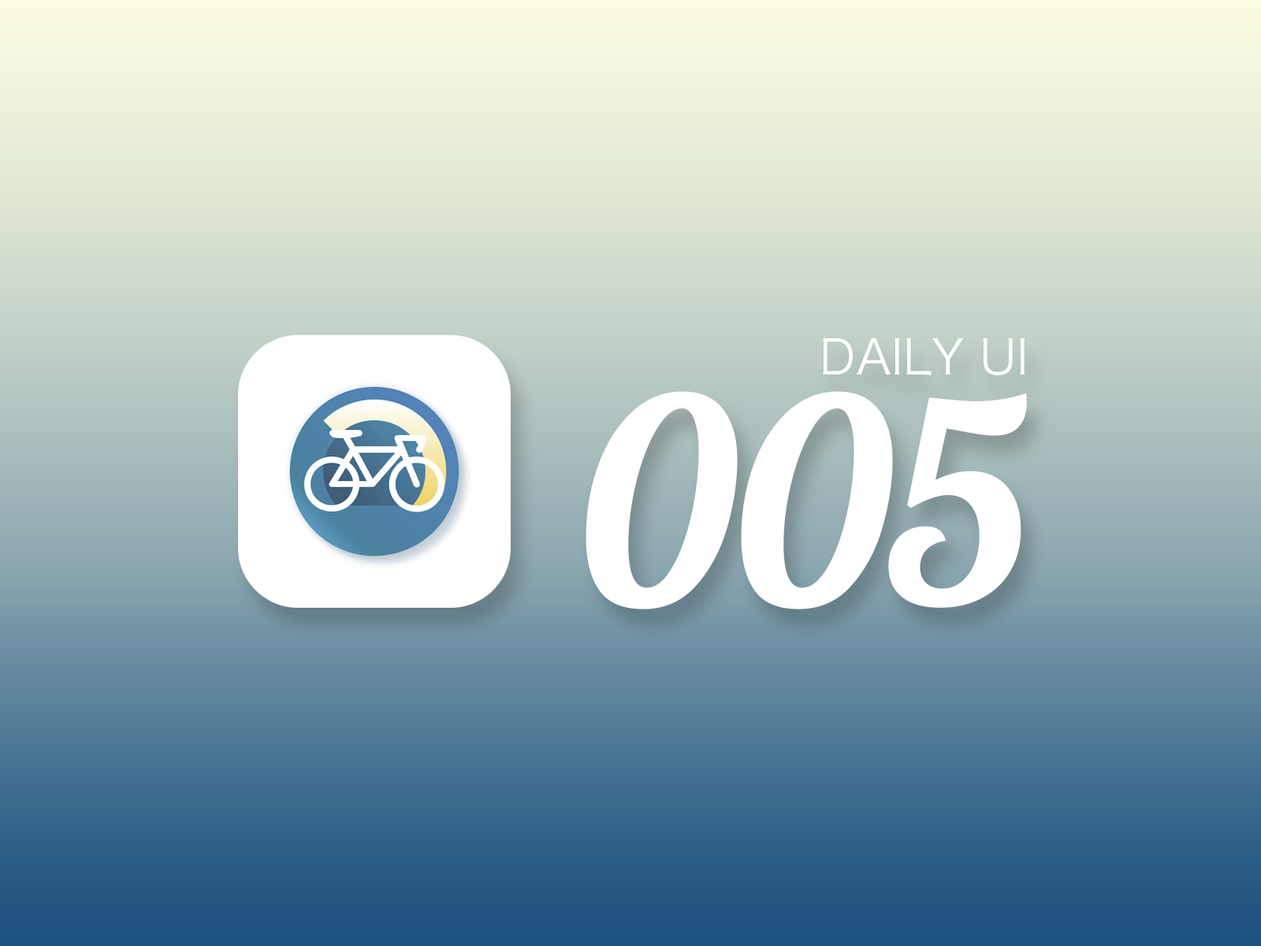
<style>
.page{position:relative;width:1261px;height:946px}
.page>*{position:absolute;margin:0}
.t1{font:47.3px "HiraKakuProN-W3";letter-spacing:0.001em;color:#ffffff}
.t2{font:284.3px "Lobster-Regular";letter-spacing:-0.019em;color:#ffffff}
</style>
<div class="page">
<p class="t1" style="left:823px;top:338px;width:201px;height:37px">DAILY UI</p>
<p class="t2" style="left:586px;top:391px;width:441px;height:218px">005</p>
</div>
